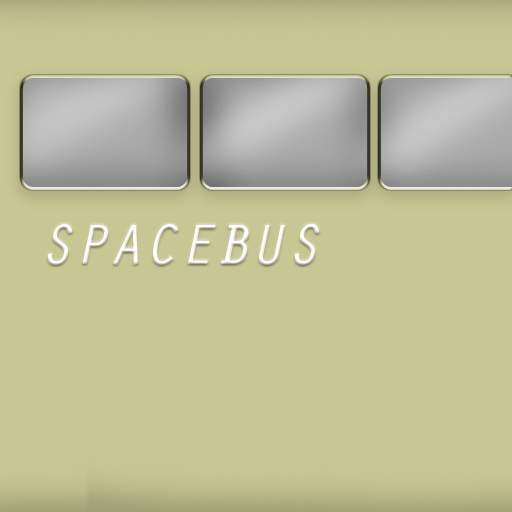
<style>
.page{position:relative;width:512px;height:512px;background:#c7c794}
.page>*{position:absolute;margin:0}
.t1{font:58.9px "OratorStd-Slanted";color:#ffffff}
</style>
<div class="page">
<p class="t1" style="left:48px;top:224px;width:271px;height:41px">SPACEBUS</p>
</div>
